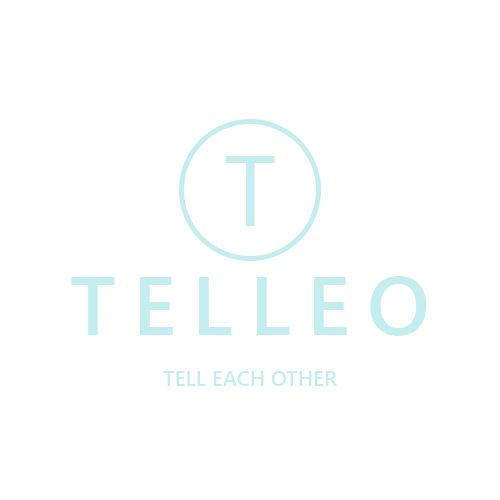
<style>
.page{position:relative;width:500px;height:500px;background:#ffffff}
.page>*{position:absolute;margin:0}
.t1{font:100px "SegoeUI";color:#c3edef}
.t2{font:83.3px "SegoeUI-Semibold";letter-spacing:0.2em;color:#c3edef}
.t3{font:20.8px "SegoeUI-Semibold";letter-spacing:0.005em;color:#c3edef}
</style>
<div class="page">
<p class="t1" style="left:226px;top:156px;width:49px;height:70px">T</p>
<p class="t2" style="left:71px;top:276px;width:356px;height:60px">TELLEO</p>
<p class="t3" style="left:163px;top:371px;width:174px;height:15px">TELL EACH OTHER</p>
</div>
